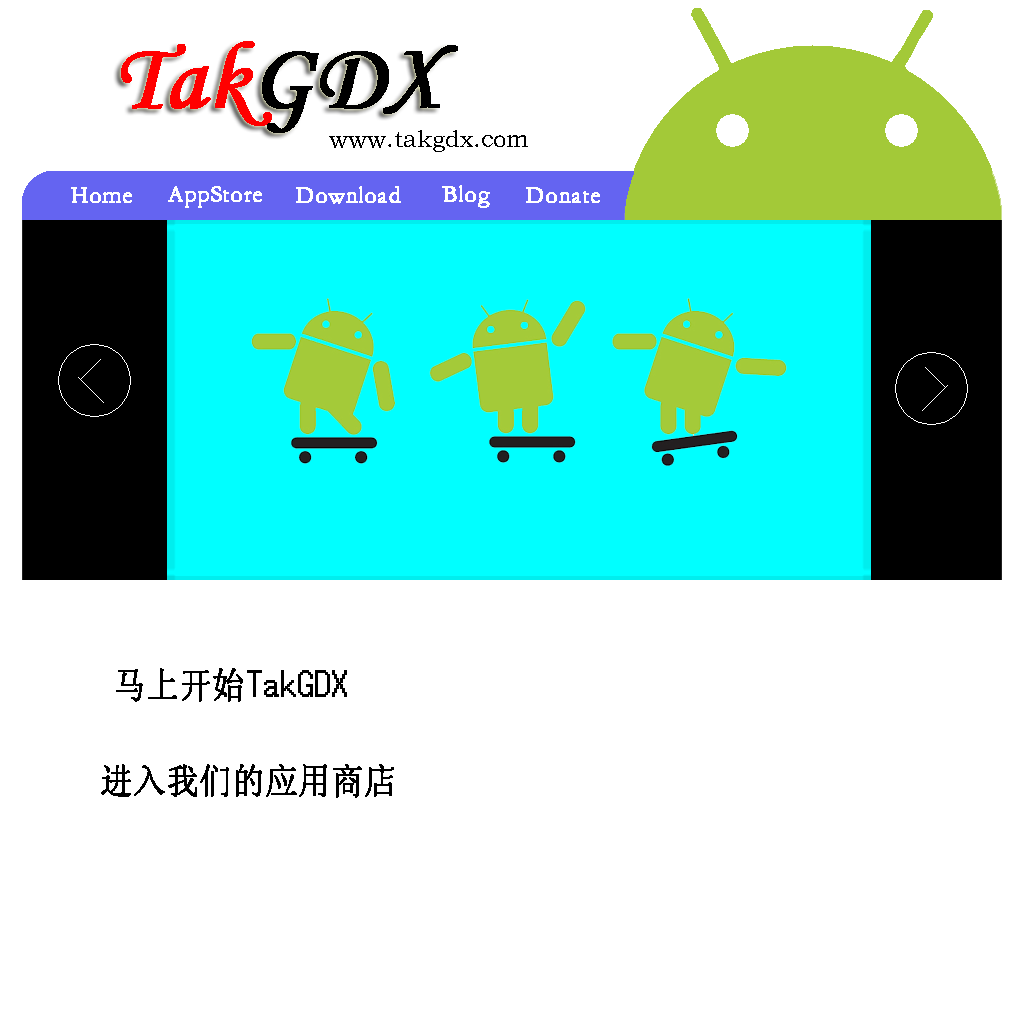
<style>
.page{position:relative;width:1024px;height:1024px;background:#ffffff}
.page>*{position:absolute;margin:0}
.t1{font:96px "STLiti";color:#ff0000;font-weight:bold}
.t2{font:96px "STLiti";color:#000000;font-weight:bold}
.t3{font:24px "STZhongsong";color:#000000}
.t4{font:24px "STSong";color:#ffffff;font-weight:bold}
.t5{font:40px "Terminal";color:#000000;font-weight:bold}
</style>
<div class="page">
<p class="t1" style="left:121px;top:41px;width:337px;height:92px">Tak<span class="t2">GDX</span></p>
<p class="t3" style="left:329px;top:130px;width:199px;height:22px">www.takgdx.com</p>
<p class="t4" style="left:442px;top:185px;width:48px;height:23px">Blog</p>
<p class="t4" style="left:71px;top:187px;width:61px;height:16px">Home</p>
<p class="t4" style="left:168px;top:186px;width:94px;height:22px">AppStore</p>
<p class="t4" style="left:296px;top:186px;width:105px;height:18px">Download</p>
<p class="t4" style="left:526px;top:187px;width:74px;height:16px">Donate</p>
<p class="t5" style="left:116px;top:668px;width:231px;height:34px">马上开始TakGDX</p>
<p class="t5" style="left:101px;top:764px;width:293px;height:34px">进入我们的应用商店</p>
</div>
